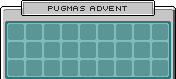
<style>
.page{position:relative;width:176px;height:79px;background:#5a9696}
.page>*{position:absolute;margin:0}
.t1{font:7px "RetroComputer";letter-spacing:0.04em;color:#2b2b2b}
</style>
<div class="page">
<p class="t1" style="left:48px;top:6px;width:79px;height:5px">pugmas  advent</p>
</div>
